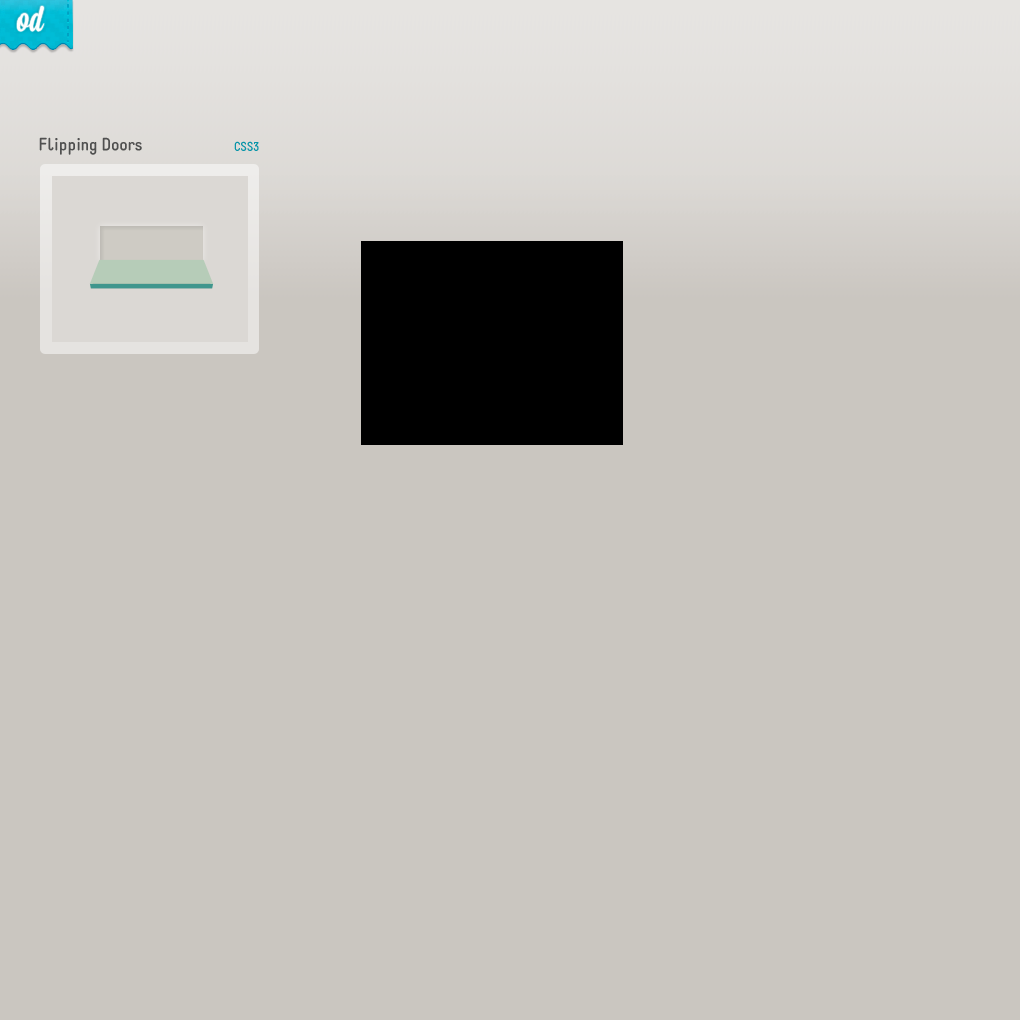
<style>
.page{position:relative;width:1020px;height:1020px;background:#cac6c0}
.page>*{position:absolute;margin:0}
.t1{font:18px "StaticBold";color:#505050}
.t2{font:13px "StaticBold";color:#0894a8;text-transform:uppercase}
</style>
<div class="page">
<p class="t1" style="left:39px;top:137px;width:103px;height:18px">Flipping Doors</p>
<p class="t2" style="left:234px;top:141px;width:25px;height:10px">css3</p>
</div>
